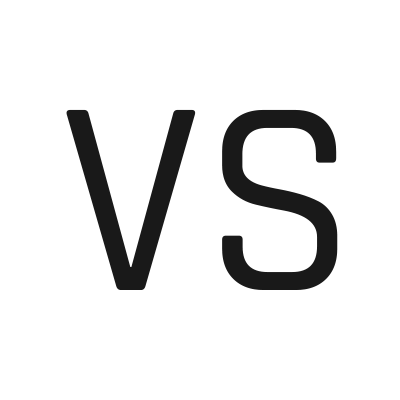
<style>
.page{position:relative;width:400px;height:400px;background:#ffffff}
.page>*{position:absolute;margin:0}
.t1{font:280.5px "Rajdhani-Medium";color:#191919}
</style>
<div class="page">
<p class="t1" style="left:66px;top:109px;width:272px;height:181px">VS</p>
</div>
